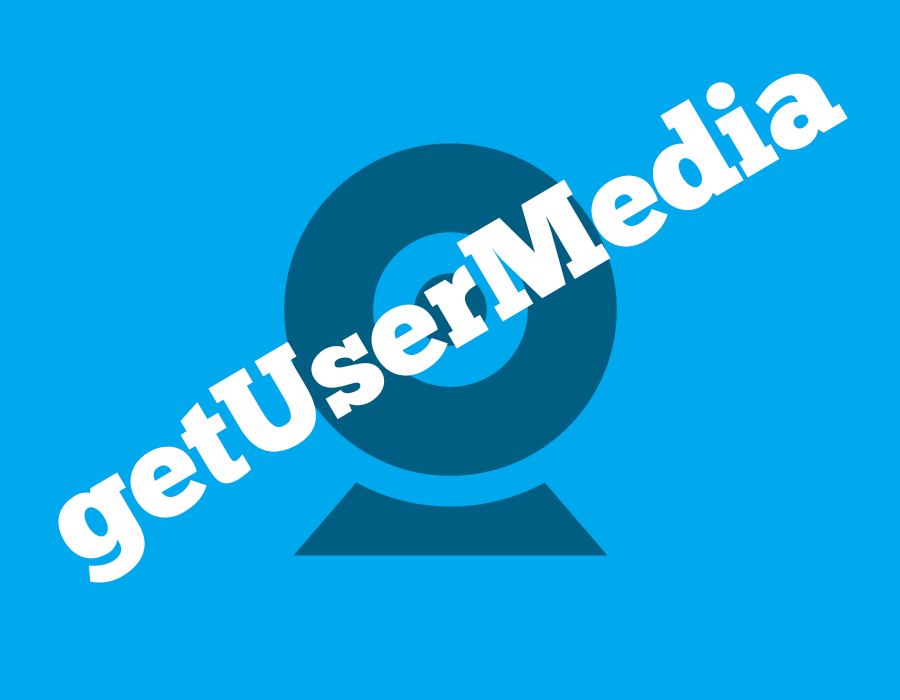
<style>
.page{position:relative;width:900px;height:700px;background:#00a9ee}
.page>*{position:absolute;margin:0}
.t1{font:130.1px "ChunkFive-Roman";color:#ffffff}
</style>
<div class="page">
<p class="t1" style="left:58px;top:73px;width:790px;height:510px;rotate:-30deg">getUserMedia</p>
</div>
